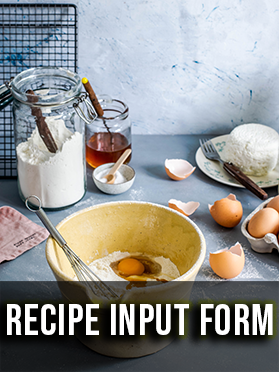
<style>
.page{position:relative;width:279px;height:372px}
.page>*{position:absolute;margin:0}
.t1{font:43px "BebasNeue-Regular";letter-spacing:0.025em;color:#ffffff}
</style>
<div class="page">
<p class="t1" style="left:7px;top:304px;width:266px;height:31px">recipe input form</p>
</div>
